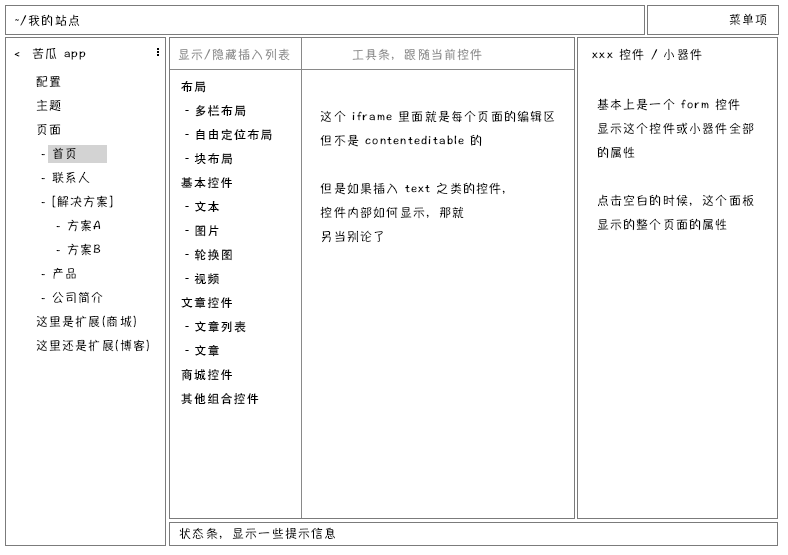
<style>
.page{position:relative;width:788px;height:555px;background:#ffffff}
.page>*{position:absolute;margin:0}
.t1{font:12px "HannotateSC-W5";letter-spacing:0.1em;color:#000000}
.t2{font:12px "HannotateSC-W5";letter-spacing:0.1em;color:#898989}
.t3{font:12px/24px "HannotateSC-W5";letter-spacing:0.1em;color:#000000}
.t4{font:12px/24px "STHeiti";letter-spacing:0.1em;color:#000000}
</style>
<div class="page">
<p class="t1" style="left:15px;top:14px;width:65px;height:13px">~/我的站点</p>
<p class="t1" style="left:729px;top:13px;width:38px;height:13px">菜单项</p>
<p class="t1" style="left:14px;top:47px;width:72px;height:13px">&lt;  苦瓜 app</p>
<p class="t2" style="left:178px;top:48px;width:112px;height:13px">显示/隐藏插入列表</p>
<p class="t2" style="left:352px;top:48px;width:130px;height:13px">工具条，跟随当前控件</p>
<p class="t1" style="left:592px;top:48px;width:110px;height:13px">xxx 控件 / 小器件</p>
<p class="t3" style="left:36px;top:76px;width:113px;height:276px">配置<br>主题<br>页面<br> - 首页<br> - 联系人<br> - [解决方案]<br>    - 方案A<br>    - 方案B<br> - 产品<br> - 公司简介<br>这里是扩展(商城)<br>这里还是扩展(博客)</p>
<p class="t4" style="left:181px;top:81px;width:91px;height:324px">布局<br> - 多栏布局<br> - 自由定位布局<br> - 块布局<br>基本控件<br> - 文本<br> - 图片<br> - 轮换图<br> - 视频<br>文章控件<br> - 文章列表<br> - 文章<br>商城控件<br>其他组合控件</p>
<p class="t3" style="left:597px;top:98px;width:157px;height:133px">基本上是一个 form 控件<br>显示这个控件或小器件全部<br>的属性<br><br>点击空白的时候，这个面板<br>显示的整个页面的属性</p>
<p class="t3" style="left:320px;top:110px;width:235px;height:133px">这个 iframe 里面就是每个页面的编辑区<br>但不是 contenteditable 的<br><br>但是如果插入 text 之类的控件，<br>控件内部如何显示，那就<br>另当别论了</p>
<p class="t1" style="left:179px;top:527px;width:156px;height:13px">状态条，显示一些提示信息</p>
</div>
